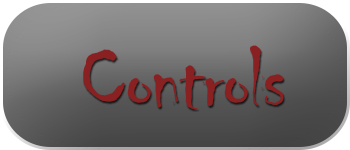
<style>
.page{position:relative;width:350px;height:150px}
.page>*{position:absolute;margin:0}
.t1{font:89.9px "Chiller-Regular";letter-spacing:-0.025em;color:#892122}
</style>
<div class="page">
<p class="t1" style="left:83px;top:45px;width:201px;height:64px">Controls</p>
</div>
